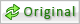
<style>
.page{position:relative;width:80px;height:24px}
.page>*{position:absolute;margin:0}
.t1{font:14px "Calibri";letter-spacing:0.075em;color:#257e10}
</style>
<div class="page">
<p class="t1" style="left:24px;top:6px;width:51px;height:13px">Original</p>
</div>
